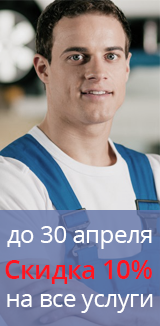
<style>
.page{position:relative;width:160px;height:326px}
.page>*{position:absolute;margin:0}
.t1{font:24px "OpenSans";letter-spacing:-0.02em;color:#ffffff}
.t2{font:26px "OpenSans-Semibold";letter-spacing:-0.02em;color:#ff141f}
</style>
<div class="page">
<p class="t1" style="left:7px;top:226px;width:145px;height:23px">до 30 апреля</p>
<p class="t2" style="left:5px;top:260px;width:147px;height:24px">Скидка 10%</p>
<p class="t1" style="left:7px;top:294px;width:146px;height:19px">на все услуги</p>
</div>
